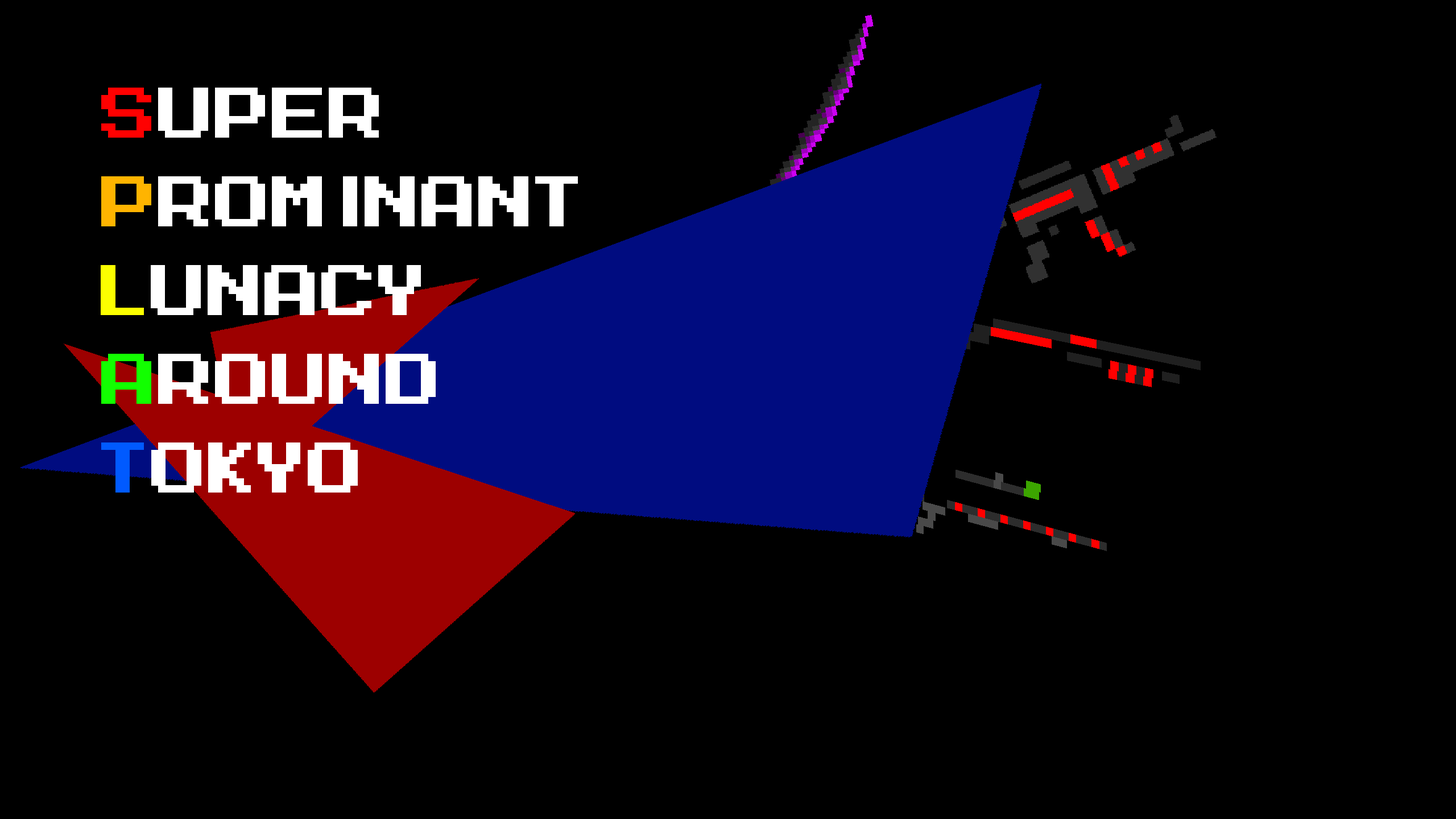
<style>
.page{position:relative;width:1456px;height:819px;background:#000000}
.page>*{position:absolute;margin:0}
.t1{font:56.9px "MegaMan-2";color:#ffffff}
.t2{font:56.9px "MegaMan-2";color:#ff0101}
.t3{font:56.9px "MegaMan-2";color:#ffb400}
.t4{font:56.9px "MegaMan-2";color:#fcff00}
.t5{font:56.9px "MegaMan-2";color:#12ff00}
.t6{font:56.9px "MegaMan-2";color:#005aff}
</style>
<div class="page">
<p class="t1" style="left:101px;top:88px;width:278px;height:50px"><span class="t2">S</span>uper</p>
<p class="t1" style="left:101px;top:176px;width:477px;height:50px"><span class="t3">P</span>rominant</p>
<p class="t1" style="left:101px;top:265px;width:320px;height:50px"><span class="t4">L</span>unacy</p>
<p class="t1" style="left:101px;top:354px;width:335px;height:50px"><span class="t5">A</span>round</p>
<p class="t1" style="left:101px;top:442px;width:257px;height:51px"><span class="t6">T</span>okyo</p>
</div>
